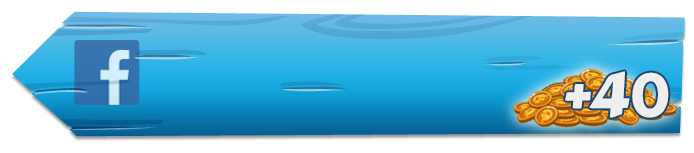
<style>
.page{position:relative;width:694px;height:153px;background:#ffffff}
.page>*{position:absolute;margin:0}
.t1{font:59.4px "CarterOne";letter-spacing:-0.02em;color:#eeeeee;scale:1.04 1}
.t2{font:59.4px "CarterOne";letter-spacing:-0.02em;color:#eeeeee;scale:0.84 1}
</style>
<div class="page">
<p class="t1" style="left:565px;top:71px;width:104px;height:47px">+4<span class="t2">0</span></p>
</div>
